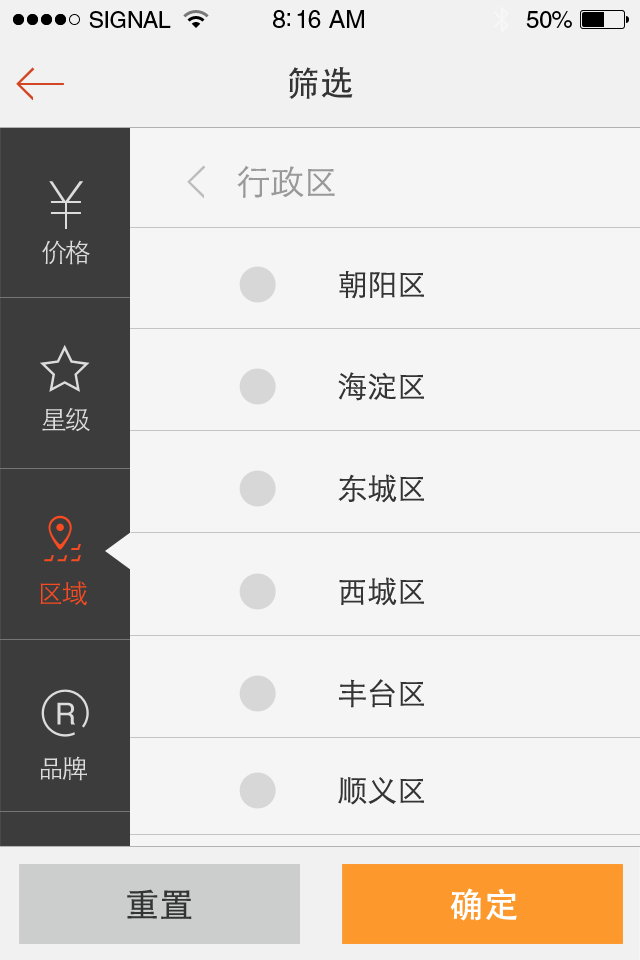
<style>
.page{position:relative;width:640px;height:960px;background:#f5f5f5}
.page>*{position:absolute;margin:0}
.t1{font:34px "STHeitiSC-Medium";color:#343434}
.t2{font:34px "STHeitiSC-Light";color:#999999}
.t3{font:26px "STHeitiSC-Light";letter-spacing:-0.08em;color:#dcdcdc}
.t4{font:30px "STHeitiSC-Light";color:#343434}
.t5{font:26px "STHeitiSC-Light";letter-spacing:-0.08em;color:#f94b21}
.t6{font:30px "Helvetica";letter-spacing:-0.08em;color:#dcdcdc}
.t7{font:34px "AdobeHeitiStd-Regular";color:#343434}
.t8{font:34px "AdobeHeitiStd-Regular";color:#ffffff;font-weight:bold}
</style>
<div class="page">
<p class="t1" style="left:289px;top:67px;width:64px;height:32px">筛选</p>
<p class="t2" style="left:237px;top:165px;width:98px;height:33px">行政区</p>
<p class="t3" style="left:42px;top:240px;width:48px;height:25px">价格</p>
<p class="t4" style="left:339px;top:271px;width:85px;height:28px">朝阳区</p>
<p class="t4" style="left:338px;top:372px;width:86px;height:29px">海淀区</p>
<p class="t3" style="left:42px;top:407px;width:48px;height:25px">星级</p>
<p class="t4" style="left:338px;top:474px;width:86px;height:29px">东城区</p>
<p class="t5" style="left:40px;top:581px;width:47px;height:25px">区域</p>
<p class="t4" style="left:339px;top:577px;width:85px;height:29px">西城区</p>
<p class="t4" style="left:339px;top:679px;width:85px;height:29px">丰台区</p>
<p class="t6" style="left:57px;top:702px;width:18px;height:23px">R</p>
<p class="t3" style="left:40px;top:756px;width:47px;height:25px">品牌</p>
<p class="t4" style="left:338px;top:777px;width:86px;height:28px">顺义区</p>
<p class="t7" style="left:127px;top:889px;width:65px;height:30px">重置</p>
<p class="t8" style="left:450px;top:888px;width:67px;height:33px">确定</p>
</div>
